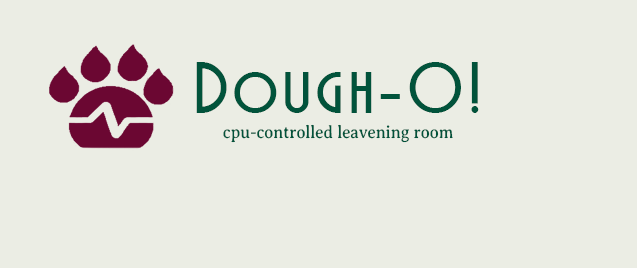
<style>
.page{position:relative;width:637px;height:268px;background:#ebede4}
.page>*{position:absolute;margin:0}
.t1{font:70px "MarquisetteBTNBold";letter-spacing:0.075em;color:#01533b}
.t2{font:18px "AveriaSerifLibre-Regular";color:#01533b;scale:0.91 1}
</style>
<div class="page">
<p class="t1" style="left:196px;top:62px;width:283px;height:51px">Dough-O!</p>
<p class="t2" style="left:223px;top:124px;width:230px;height:19px">cpu-controlled leavening room</p>
</div>
